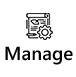
<style>
.page{position:relative;width:76px;height:77px;background:#ffffff}
.page>*{position:absolute;margin:0}
.t1{font:18.8px "YuGothicUI-Semibold";color:#000000}
</style>
<div class="page">
<p class="t1" style="left:5px;top:46px;width:68px;height:19px">Manage</p>
</div>
